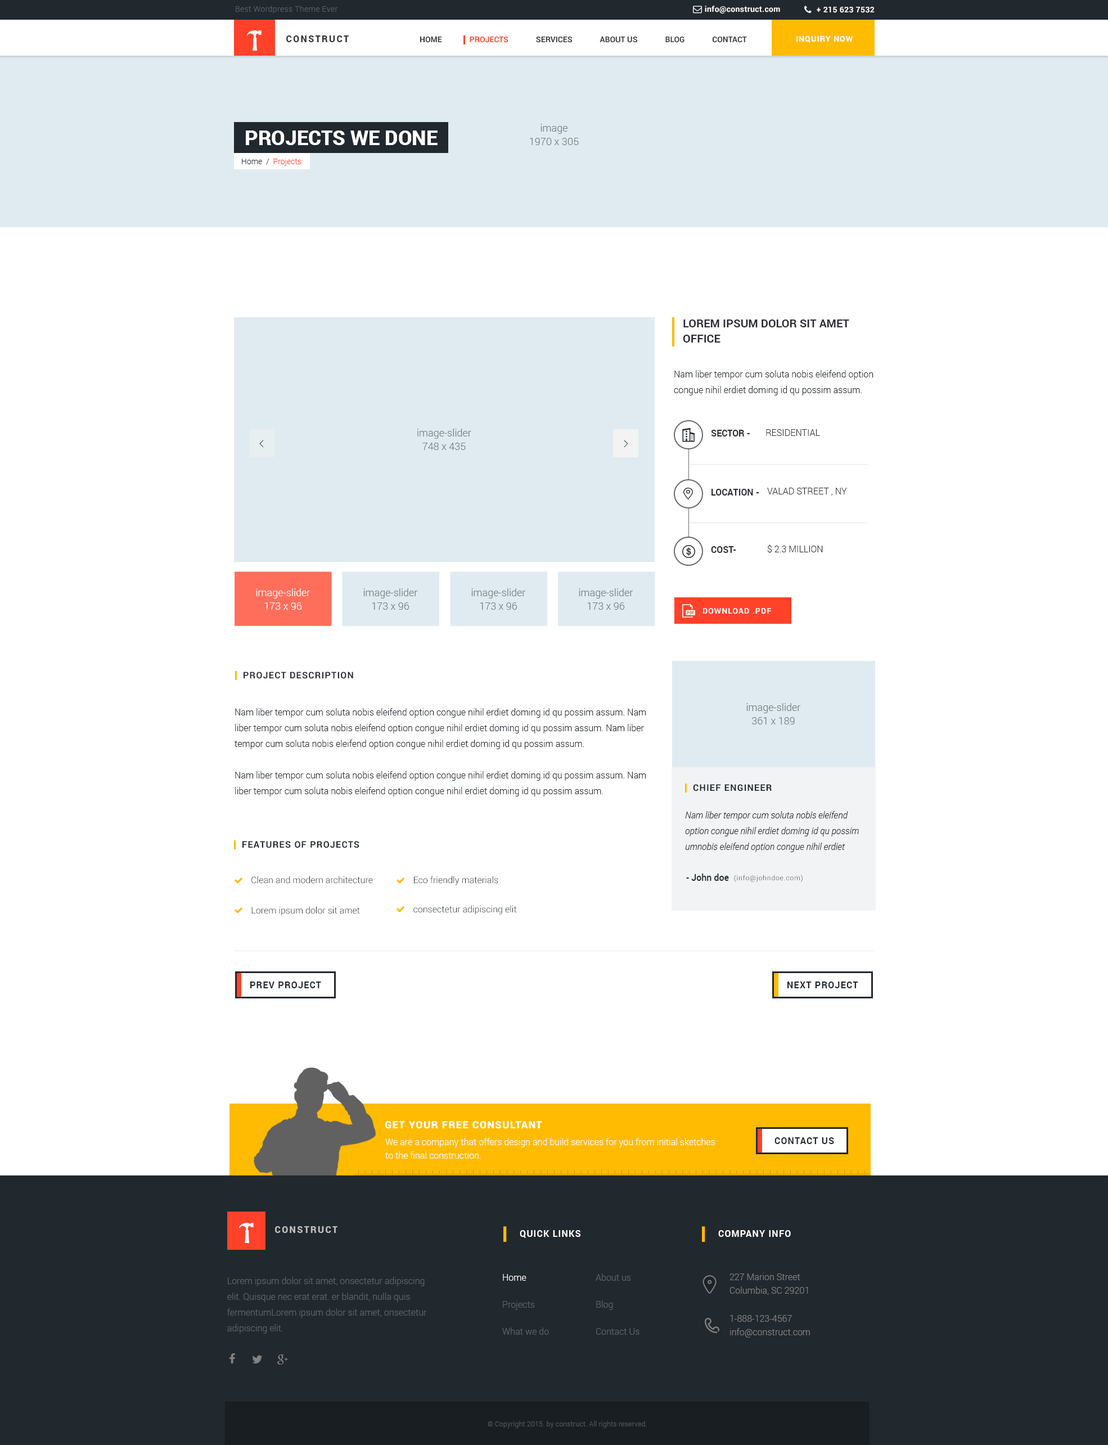
<style>
.page{position:relative;width:1108px;height:1445px;background:#ffffff}
.page>*{position:absolute;margin:0}
.t1{font:7.9px "Roboto-Light";letter-spacing:0.025em;color:#5a5f63}
.t2{font:7.9px "Roboto-Bold";letter-spacing:0.025em;color:#ffffff}
.t3{font:9px "Roboto-Black";letter-spacing:0.15em;color:#353537;text-transform:uppercase}
.t4{font:7.9px "Roboto-Bold";color:#353537}
.t5{font:7.9px "Roboto-Bold";color:#ff4229}
.t6{font:7.9px "Roboto-Bold";letter-spacing:0.075em;color:#ffffff;text-transform:uppercase}
.t7{font:10.1px/13.5px "Roboto-Light";color:#767d81}
.t8{font:20.2px "Roboto-Black";color:#ffffff;text-transform:uppercase}
.t9{font:7.9px "Roboto-Light";color:#ff4229}
.t10{font:7.9px "Roboto-Light";color:#21282e}
.t11{font:11.2px/15.2px "Roboto-Bold";color:#2d2c32;text-transform:uppercase}
.t12{font:9px/15.8px "Roboto-Light";color:#21282e}
.t13{font:9px "Roboto-Bold";color:#2d2c32;text-transform:uppercase}
.t14{font:9px "Roboto-Light";color:#2d2c32;text-transform:uppercase}
.t15{font:10.1px "Quicksand-Regular";letter-spacing:0.1em;color:#21282e}
.t16{font:10.1px/13.5px "Roboto-Light";color:#ffffff}
.t17{font:9px "Roboto-Bold";letter-spacing:0.075em;color:#2d2c32;text-transform:uppercase}
.t18{font:9px "Roboto-Bold";letter-spacing:0.075em;color:#21282e;text-transform:uppercase}
.t19{font:9px/15.8px "Roboto-LightItalic";color:#21282e}
.t20{font:9px "Roboto-Light";color:#21282e}
.t21{font:9px "Roboto-Medium";color:#21282e}
.t22{font:6.8px "Roboto-Light";letter-spacing:0.075em}
.t23{font:10.1px "Roboto-Black";letter-spacing:0.075em;color:#ffffff;text-transform:uppercase}
.t24{font:9px/13.5px "Roboto-Light";color:#ffffff}
.t25{font:9px "Roboto-Black";letter-spacing:0.15em;color:#c0bfbe;text-transform:uppercase}
.t26{font:9px "Roboto-Bold";letter-spacing:0.075em;color:#ffffff;text-transform:uppercase}
.t27{font:9px/15.8px "Roboto-Light";color:#5e656a}
.t28{font:9px/27px "Roboto-Light";color:#5e656a}
.t29{font:9px/27px "Roboto-Light";color:#ffffff}
.t30{font:9px/13.5px "Roboto-Light";color:#828282}
.t31{font:6.8px "Roboto-Light";letter-spacing:0.025em;color:#52595e}
</style>
<div class="page">
<p class="t1" style="left:236px;top:6px;width:102px;height:8px">Best Wordpress Theme Ever</p>
<p class="t2" style="left:705px;top:6px;width:75px;height:8px">info@construct.com</p>
<p class="t2" style="left:817px;top:7px;width:58px;height:6px">+ 215 623 7532</p>
<p class="t3" style="left:286px;top:35px;width:63px;height:7px">Construct</p>
<p class="t4" style="left:420px;top:37px;width:327px;height:6px">HOME              <span class="t5">PROJECTS</span>              SERVICES              ABOUT US              BLOG              CONTACT</p>
<p class="t6" style="left:796px;top:36px;width:57px;height:7px">Inquiry Now</p>
<p class="t7" style="left:530px;top:124px;width:49px;height:21px;text-align:center">image<br>1970 x 305</p>
<p class="t8" style="left:246px;top:130px;width:192px;height:15px">Projects we done</p>
<p class="t9" style="left:242px;top:158px;width:60px;height:8px"><span class="t10">Home  /  </span>Projects</p>
<p class="t11" style="left:683px;top:320px;width:166px;height:23px">Lorem ipsum dolor sit amet<br>office</p>
<p class="t12" style="left:674px;top:370px;width:200px;height:25px">Nam liber tempor cum soluta nobis eleifend option congue nihil erdiet doming id qu possim assum.</p>
<p class="t7" style="left:417px;top:429px;width:54px;height:21px;text-align:center">image-slider<br>748 x 435</p>
<p class="t13" style="left:711px;top:430px;width:39px;height:6px">Sector -</p>
<p class="t14" style="left:766px;top:429px;width:54px;height:7px">Residential</p>
<p class="t15" style="left:259px;top:440px;width:5px;height:7px;rotate:180deg">&gt;</p>
<p class="t15" style="left:624px;top:440px;width:4px;height:7px">&gt;</p>
<p class="t13" style="left:712px;top:489px;width:47px;height:7px">Location -</p>
<p class="t14" style="left:767px;top:488px;width:80px;height:8px">Valad Street , NY</p>
<p class="t14" style="left:767px;top:544px;width:56px;height:9px">$ 2.3 million</p>
<p class="t13" style="left:711px;top:546px;width:25px;height:7px">Cost-</p>
<p class="t16" style="left:256px;top:588px;width:54px;height:22px;text-align:center">image-slider<br>173 x 96</p>
<p class="t7" style="left:363px;top:588px;width:55px;height:22px;text-align:center">image-slider<br>173 x 96</p>
<p class="t7" style="left:471px;top:588px;width:55px;height:22px;text-align:center">image-slider<br>173 x 96</p>
<p class="t7" style="left:579px;top:588px;width:54px;height:22px;text-align:center">image-slider<br>173 x 96</p>
<p class="t6" style="left:703px;top:608px;width:68px;height:6px">Download .PDF</p>
<p class="t17" style="left:244px;top:672px;width:109px;height:7px">Project Description</p>
<p class="t12" style="left:235px;top:708px;width:411px;height:88px">Nam liber tempor cum soluta nobis eleifend option congue nihil erdiet doming id qu possim assum. Nam liber tempor cum soluta nobis eleifend option congue nihil erdiet doming id qu possim assum. Nam liber tempor cum soluta nobis eleifend option congue nihil erdiet doming id qu possim assum.<br><br>Nam liber tempor cum soluta nobis eleifend option congue nihil erdiet doming id qu possim assum. Nam liber tempor cum soluta nobis eleifend option congue nihil erdiet doming id qu possim assum.</p>
<p class="t7" style="left:746px;top:703px;width:55px;height:21px;text-align:center">image-slider<br>361 x 189</p>
<p class="t18" style="left:693px;top:784px;width:79px;height:7px">Chief engineer</p>
<p class="t19" style="left:685px;top:811px;width:174px;height:41px">Nam liber tempor cum soluta nobis eleifend option congue nihil erdiet doming id qu possim umnobis eleifend option congue nihil erdiet doming id qu possim</p>
<p class="t18" style="left:242px;top:841px;width:117px;height:7px">Features of Projects</p>
<p class="t20" style="left:251px;top:876px;width:122px;height:8px">Clean and modern architecture</p>
<p class="t20" style="left:414px;top:876px;width:84px;height:9px">Eco friendly materials</p>
<p class="t21" style="left:686px;top:874px;width:43px;height:7px">- John doe</p>
<p class="t22" style="left:734px;top:875px;width:69px;height:7px">(info@johndoe.com)</p>
<p class="t20" style="left:413px;top:905px;width:104px;height:10px">consectetur adipiscing elit</p>
<p class="t20" style="left:251px;top:906px;width:109px;height:10px">Lorem ipsum dolor sit amet</p>
<p class="t18" style="left:250px;top:982px;width:71px;height:6px">Prev Project</p>
<p class="t18" style="left:788px;top:982px;width:70px;height:6px">Next Project</p>
<p class="t23" style="left:385px;top:1121px;width:157px;height:8px">Get Your Free Consultant</p>
<p class="t24" style="left:385px;top:1138px;width:330px;height:21px">We are a company that offers design and build services for you from initial sketches <br>to the final construction.</p>
<p class="t18" style="left:775px;top:1137px;width:59px;height:7px">Contact US</p>
<p class="t25" style="left:275px;top:1226px;width:63px;height:7px">Construct</p>
<p class="t26" style="left:520px;top:1230px;width:60px;height:8px">Quick Links</p>
<p class="t26" style="left:718px;top:1230px;width:73px;height:7px">Company Info</p>
<p class="t27" style="left:227px;top:1277px;width:200px;height:57px">Lorem ipsum dolor sit amet, onsectetur adipiscing elit. Quisque nec erat erat. er blandit, nulla quis fermentumLorem ipsum dolor sit amet, onsectetur adipiscing elit.</p>
<p class="t28" style="left:502px;top:1274px;width:47px;height:61px"><span class="t29">Home<br></span>Projects<br>What we do</p>
<p class="t28" style="left:596px;top:1274px;width:44px;height:61px">About us<br>Blog<br>Contact Us</p>
<p class="t30" style="left:730px;top:1273px;width:78px;height:22px">227 Marion Street<br>Columbia, SC 29201</p>
<p class="t30" style="left:730px;top:1315px;width:80px;height:23px">1-888-123-4567<br>info@construct.com</p>
<p class="t31" style="left:488px;top:1421px;width:159px;height:7px">© Copyright 2015. by construct. All rights reserved.</p>
</div>
